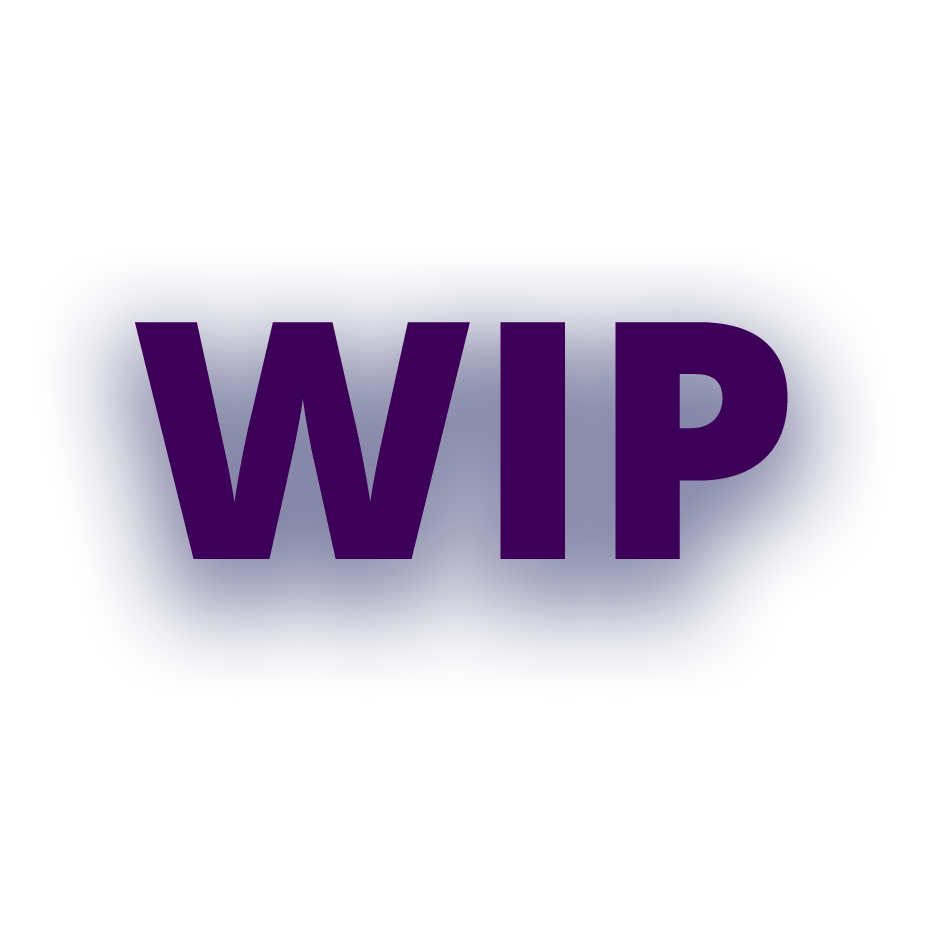
<style>
.page{position:relative;width:930px;height:930px;background:#ffffff}
.page>*{position:absolute;margin:0}
.t1{font:331.8px "OpenSans-ExtraBold";color:#3d0059}
</style>
<div class="page">
<p class="t1" style="left:135px;top:322px;width:653px;height:237px">WIP</p>
</div>
